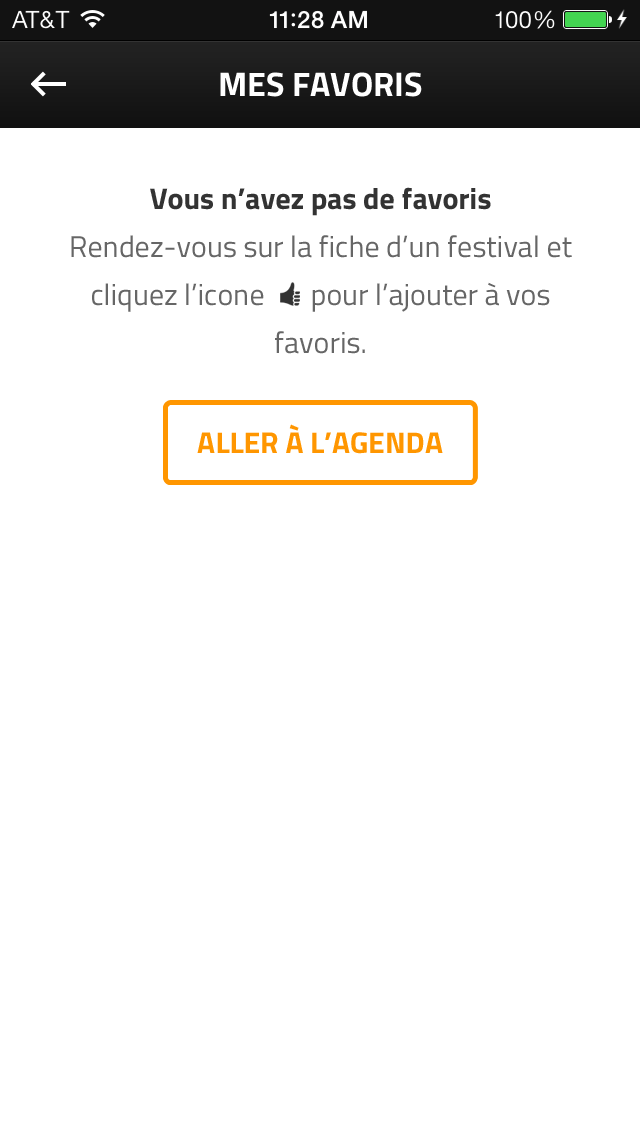
<style>
.page{position:relative;width:640px;height:1136px;background:#ffffff}
.page>*{position:absolute;margin:0}
.t1{font:34px "Titillium-Bold";color:#ffffff;text-transform:uppercase}
.t2{font:30px/48px "Titillium-Regular";color:#666666}
.t3{font:30px/30px "Titillium-Bold";color:#333333}
.t4{font:30px "Titillium-Bold";color:#ff9600;text-transform:uppercase}
</style>
<div class="page">
<p class="t1" style="left:220px;top:72px;width:202px;height:25px">Mes favoris</p>
<p class="t2" style="left:71px;top:187px;width:501px;height:167px;text-align:center"><span class="t3">Vous n’avez pas de favoris<br></span>Rendez-vous sur la fiche d’un festival et cliquez l’icone       pour l’ajouter à vos favoris.</p>
<p class="t4" style="left:197px;top:424px;width:246px;height:30px">Aller à l’agenda</p>
</div>
